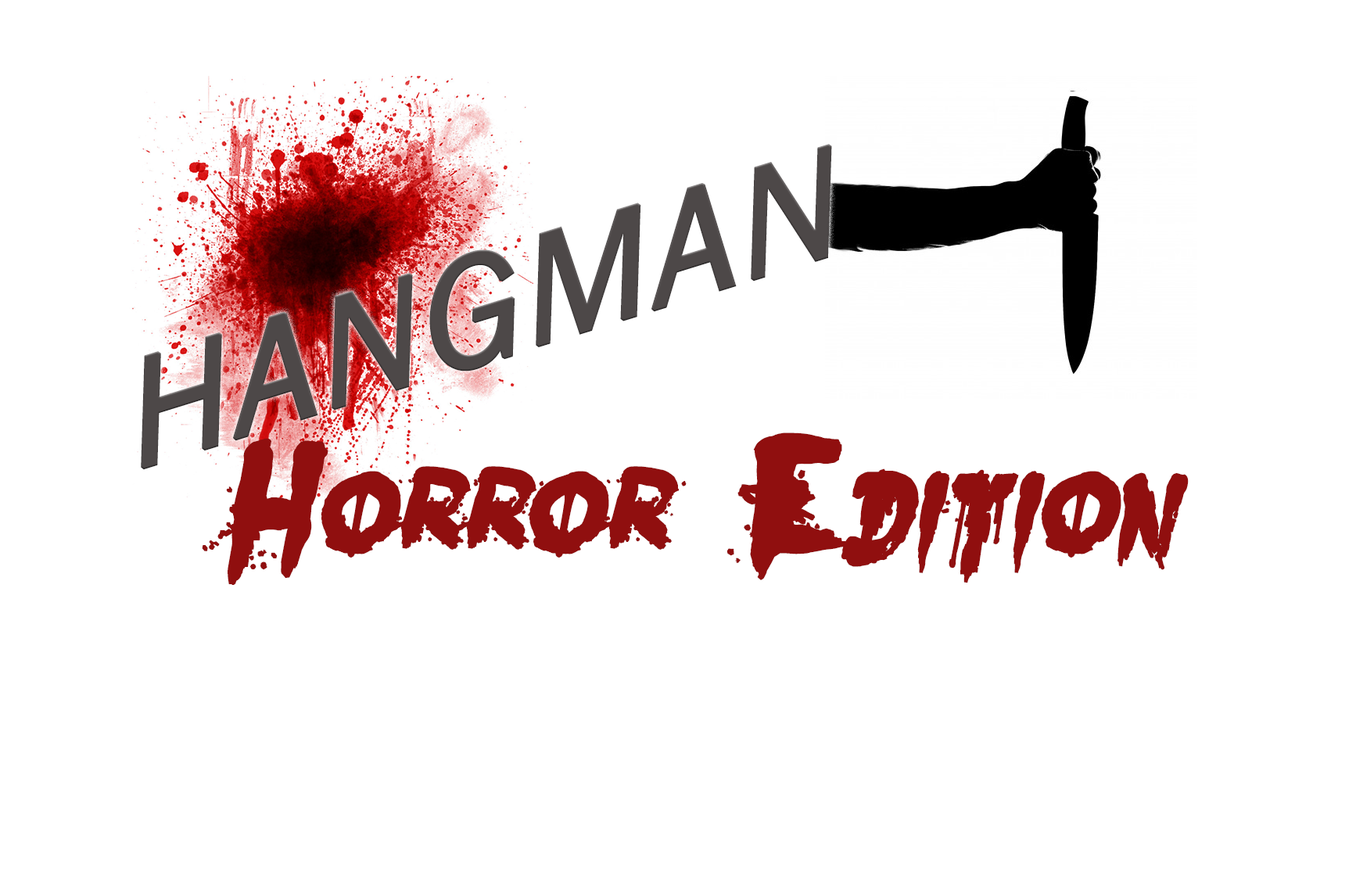
<style>
.page{position:relative;width:1356px;height:879px;background:#ffffff}
.page>*{position:absolute;margin:0}
.t1{font:156.4px "FranklinGothic-BookItalic";color:#4d4848;font-variant:small-caps;font-weight:bold;font-style:italic}
.t2{font:172.1px "Nightbird";color:#900f0f;font-variant:small-caps;font-weight:bold;font-style:italic}
</style>
<div class="page">
<p class="t1" style="left:141px;top:144px;width:691px;height:326px;rotate:-17deg">HANGMAN</p>
<p class="t2" style="left:202px;top:433px;width:987px;height:152px">Horror Edition</p>
</div>
